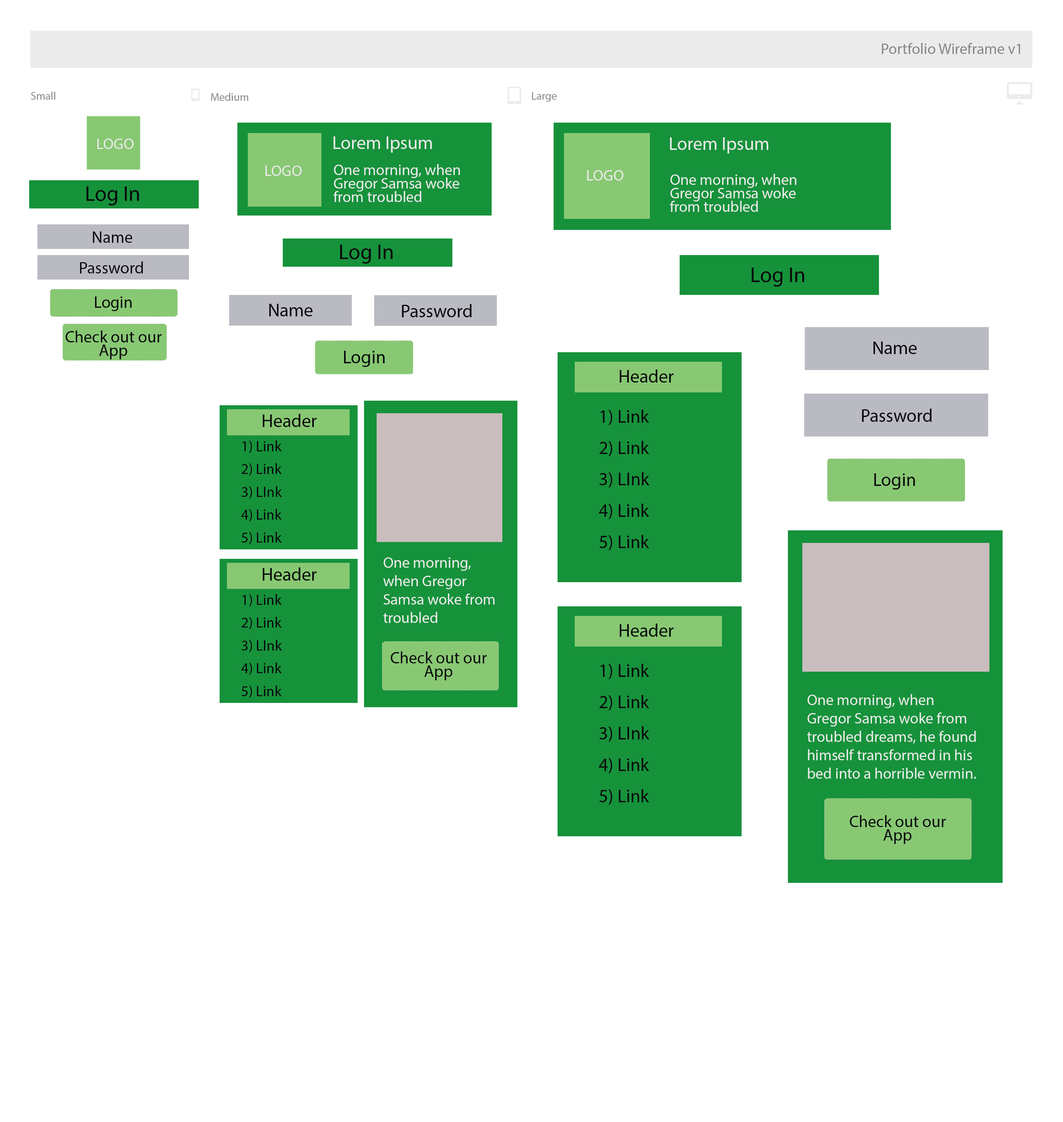
<style>
.page{position:relative;width:1063px;height:1122px;background:#ffffff}
.page>*{position:absolute;margin:0}
.t1{font:15.3px "MyriadPro-Regular";color:#878787}
.t2{font:11px "MyriadPro-Regular";color:#878787}
.t3{font:18.4px "MyriadPro-Regular";color:#ebebeb}
.t4{font:15.3px "MyriadPro-Regular";color:#ebebeb}
.t5{font:15.3px/13.5px "MyriadPro-Regular";color:#ebebeb}
.t6{font:21.5px "MyriadPro-Regular";color:#09080c}
.t7{font:16.6px "MyriadPro-Regular";color:#09080c}
.t8{font:18.4px "MyriadPro-Regular";color:#09080c}
.t9{font:16.6px/13.5px "MyriadPro-Regular";color:#09080c}
.t10{font:18.4px/30.7px "MyriadPro-Regular";color:#09080c}
.t11{font:14.7px/22.1px "MyriadPro-Regular";color:#09080c}
.t12{font:15.3px/18.4px "MyriadPro-Regular";color:#ebebeb}
</style>
<div class="page">
<p class="t1" style="left:881px;top:43px;width:139px;height:11px">Portfolio Wireframe v1</p>
<p class="t2" style="left:31px;top:92px;width:24px;height:8px">Small</p>
<p class="t2" style="left:211px;top:93px;width:37px;height:8px">Medium</p>
<p class="t2" style="left:532px;top:92px;width:24px;height:10px">Large</p>
<p class="t3" style="left:333px;top:136px;width:99px;height:17px">Lorem Ipsum</p>
<p class="t3" style="left:670px;top:137px;width:98px;height:17px">Lorem Ipsum</p>
<p class="t4" style="left:97px;top:139px;width:37px;height:10px">LOGO</p>
<p class="t4" style="left:265px;top:166px;width:37px;height:10px">LOGO</p>
<p class="t5" style="left:333px;top:164px;width:127px;height:38px">One morning, when Gregor Samsa woke from troubled</p>
<p class="t4" style="left:587px;top:170px;width:36px;height:11px">LOGO</p>
<p class="t5" style="left:670px;top:174px;width:126px;height:38px">One morning, when Gregor Samsa woke from troubled</p>
<p class="t6" style="left:86px;top:186px;width:53px;height:19px">Log In</p>
<p class="t7" style="left:93px;top:231px;width:39px;height:12px">Name</p>
<p class="t6" style="left:340px;top:245px;width:52px;height:19px">Log In</p>
<p class="t7" style="left:80px;top:262px;width:63px;height:11px">Password</p>
<p class="t6" style="left:751px;top:268px;width:53px;height:19px">Log In</p>
<p class="t7" style="left:95px;top:296px;width:37px;height:15px">Login</p>
<p class="t8" style="left:269px;top:304px;width:43px;height:12px">Name</p>
<p class="t8" style="left:402px;top:304px;width:70px;height:13px">Password</p>
<p class="t9" style="left:66px;top:331px;width:96px;height:28px;text-align:center">Check out our App</p>
<p class="t8" style="left:873px;top:342px;width:43px;height:12px">Name</p>
<p class="t8" style="left:344px;top:351px;width:40px;height:16px">Login</p>
<p class="t8" style="left:619px;top:369px;width:55px;height:14px">Header</p>
<p class="t8" style="left:262px;top:414px;width:55px;height:13px">Header</p>
<p class="t10" style="left:599px;top:410px;width:50px;height:140px">1) Link<br>2) Link<br>3) LInk<br>4) Link<br>5) Link</p>
<p class="t8" style="left:862px;top:409px;width:69px;height:13px">Password</p>
<p class="t11" style="left:241px;top:441px;width:41px;height:103px">1) Link<br>2) Link<br>3) LInk<br>4) Link<br>5) Link</p>
<p class="t8" style="left:874px;top:473px;width:41px;height:17px">Login</p>
<p class="t12" style="left:383px;top:557px;width:112px;height:66px">One morning, when Gregor Samsa woke from troubled</p>
<p class="t8" style="left:262px;top:568px;width:55px;height:13px">Header</p>
<p class="t11" style="left:241px;top:594px;width:41px;height:104px">1) Link<br>2) Link<br>3) LInk<br>4) Link<br>5) Link</p>
<p class="t8" style="left:619px;top:624px;width:55px;height:13px">Header</p>
<p class="t9" style="left:391px;top:652px;width:96px;height:28px;text-align:center">Check out our App</p>
<p class="t10" style="left:599px;top:664px;width:50px;height:140px">1) Link<br>2) Link<br>3) LInk<br>4) Link<br>5) Link</p>
<p class="t12" style="left:807px;top:694px;width:169px;height:85px">One morning, when Gregor Samsa woke from troubled dreams, he found himself transformed in his bed into a horrible vermin.</p>
<p class="t9" style="left:850px;top:815px;width:96px;height:29px;text-align:center">Check out our App</p>
</div>
